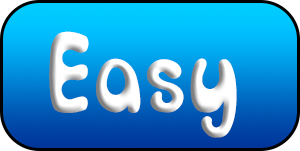
<style>
.page{position:relative;width:300px;height:151px}
.page>*{position:absolute;margin:0}
.t1{font:85px "SORRY_SORRY";letter-spacing:0.03em;color:#ffffff}
</style>
<div class="page">
<p class="t1" style="left:49px;top:31px;width:188px;height:107px">Easy To Menu</p>
</div>
